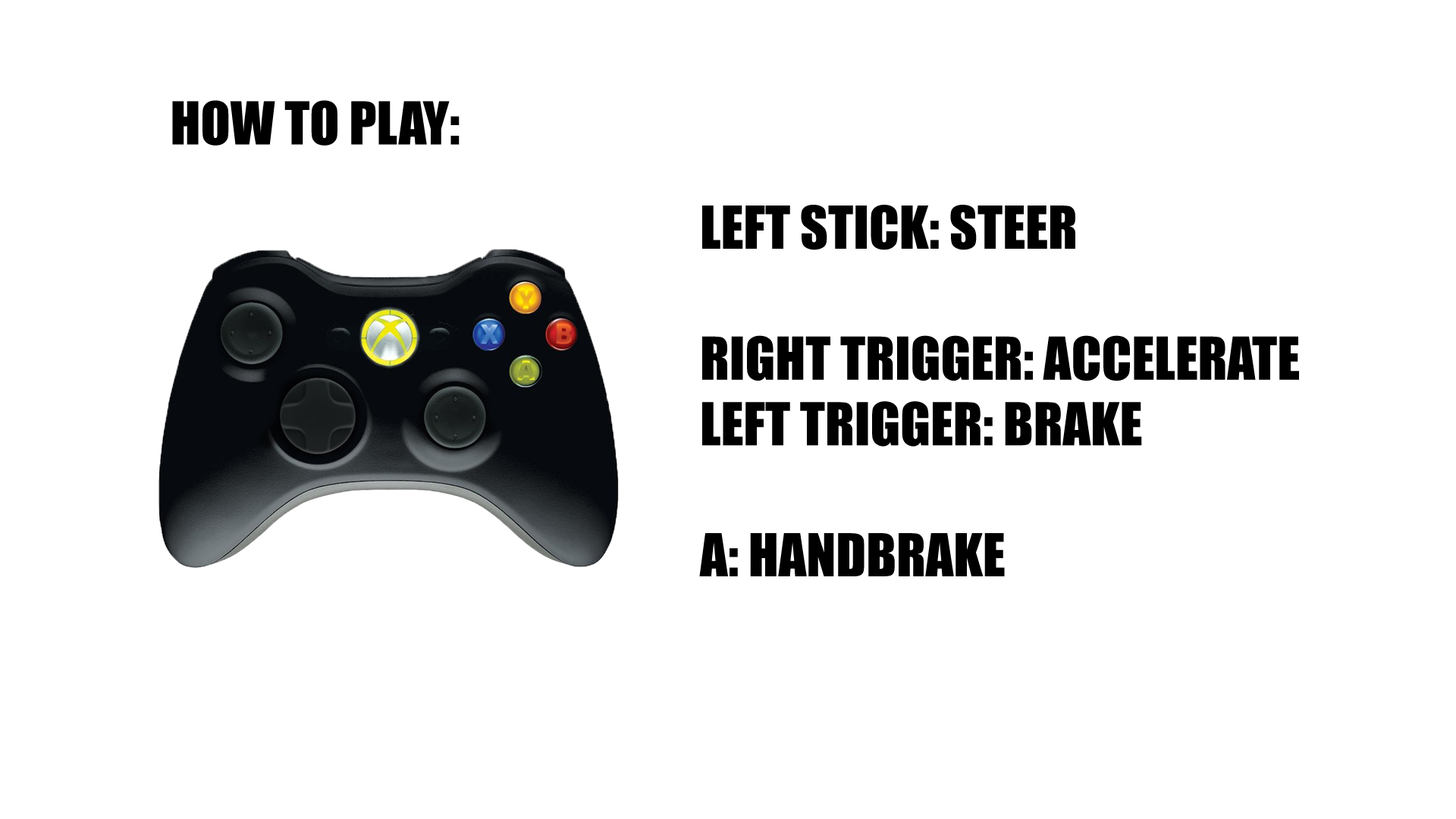
<style>
.page{position:relative;width:1456px;height:819px;background:#ffffff}
.page>*{position:absolute;margin:0}
.t1{font:54.6px "Impact";color:#000000}
</style>
<div class="page">
<p class="t1" style="left:172px;top:100px;width:288px;height:46px">HOW TO PLAY:</p>
<p class="t1" style="left:699px;top:205px;width:600px;height:371px">LEFT STICK: STEER<br><br>RIGHT TRIGGER: ACCELERATE<br>LEFT TRIGGER: BRAKE<br><br>A: HANDBRAKE</p>
</div>
